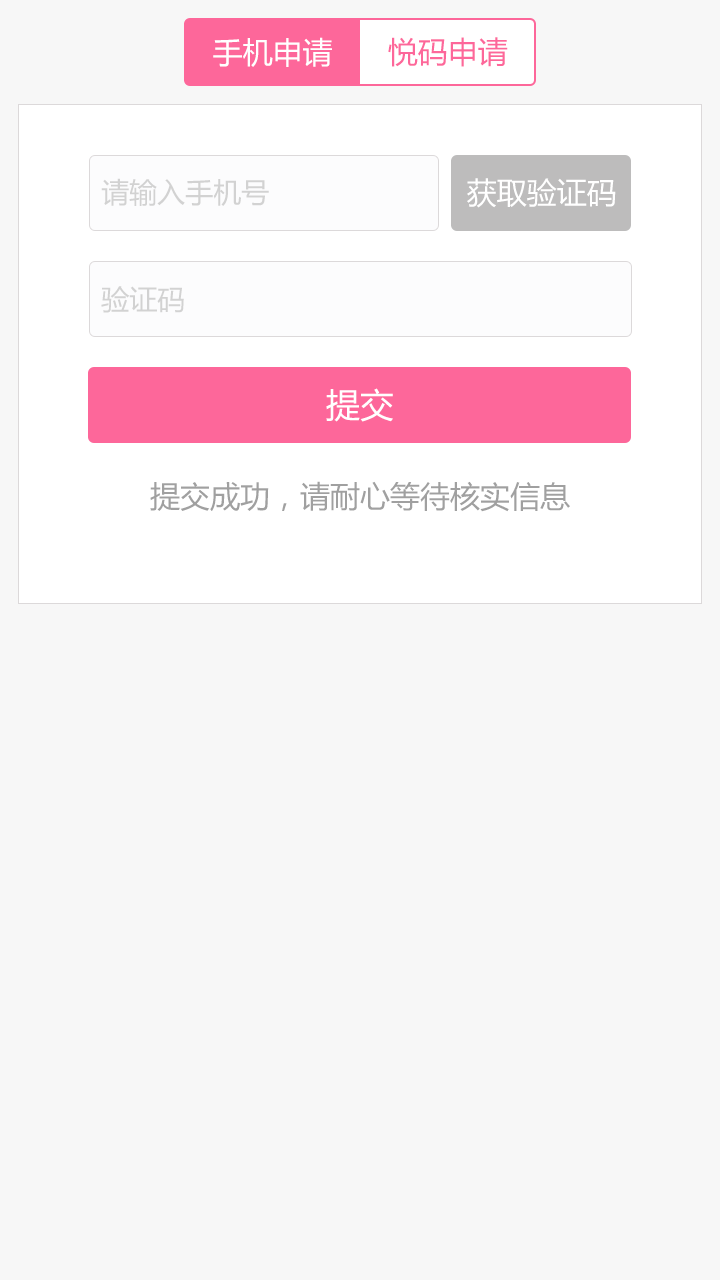
<style>
.page{position:relative;width:720px;height:1280px;background:#f7f7f7}
.page>*{position:absolute;margin:0}
.t1{font:30px "MicrosoftYaHei";color:#ffffff}
.t2{font:30px "MicrosoftYaHei";color:#fd679a}
.t3{font:28px "MicrosoftYaHei";color:#d2d2d2}
.t4{font:34px "MicrosoftYaHei";color:#ffffff}
.t5{font:30px "MicrosoftYaHei";color:#a0a0a0}
</style>
<div class="page">
<p class="t1" style="left:213px;top:37px;width:119px;height:30px">手机申请</p>
<p class="t2" style="left:388px;top:37px;width:120px;height:30px">悦码申请</p>
<p class="t3" style="left:101px;top:178px;width:168px;height:28px">请输入手机号</p>
<p class="t1" style="left:467px;top:178px;width:149px;height:30px">获取验证码</p>
<p class="t3" style="left:101px;top:286px;width:83px;height:27px">验证码</p>
<p class="t4" style="left:326px;top:388px;width:67px;height:34px">提交</p>
<p class="t5" style="left:150px;top:481px;width:420px;height:31px">提交成功，请耐心等待核实信息</p>
</div>
